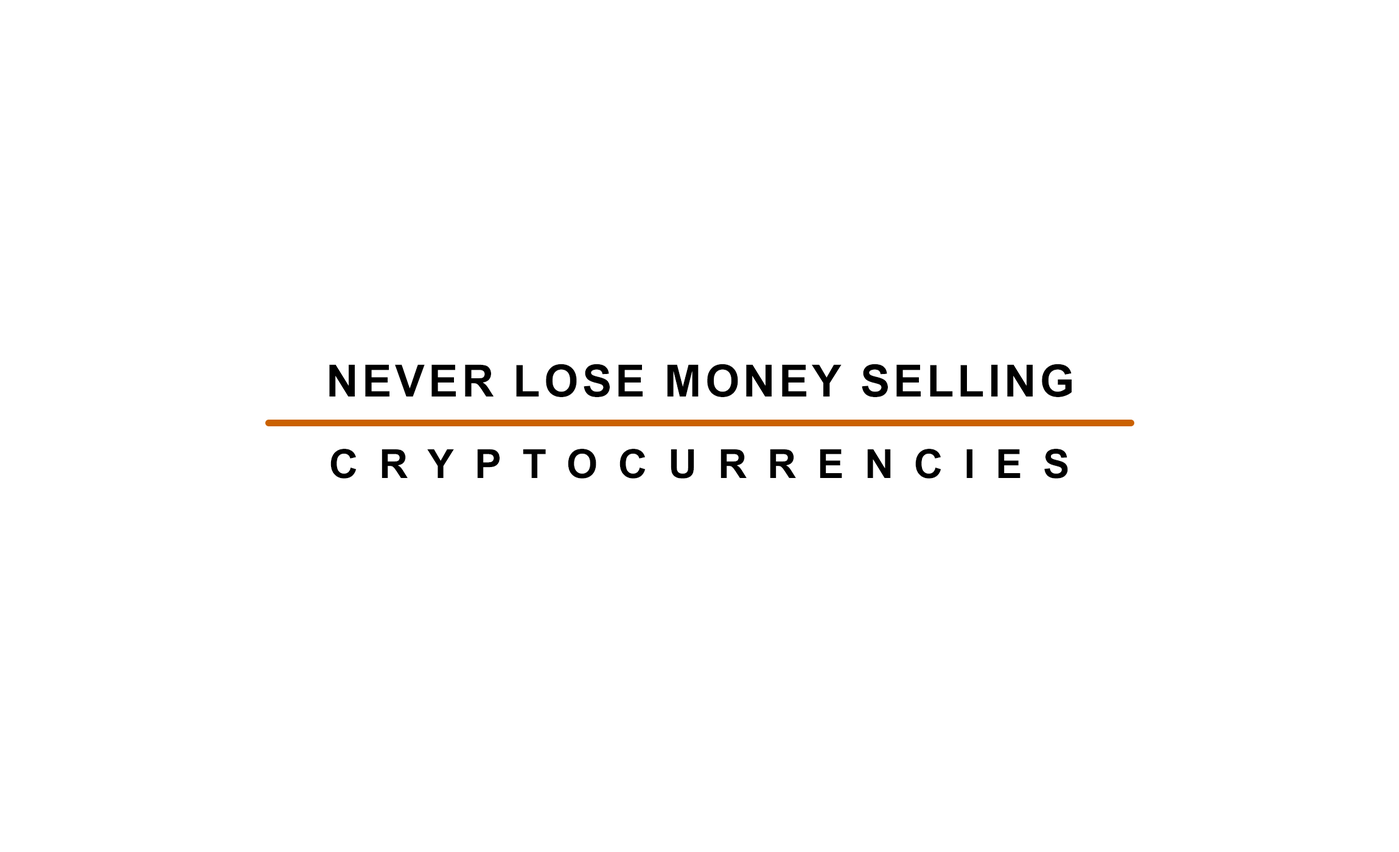
<style>
.page{position:relative;width:1399px;height:852px;background:#ffffff}
.page>*{position:absolute;margin:0}
.t1{font:44.5px "Arial-BoldMT";letter-spacing:0.08em;color:#000000}
.t2{font:40px "Arial-BoldMT";letter-spacing:0.52em;color:#000000}
.t3{font:40px "Arial-BoldMT";letter-spacing:0.62em;color:#000000}
</style>
<div class="page">
<p class="t1" style="left:329px;top:364px;width:742px;height:33px">NEVER LOSE MONEY SELLING</p>
<p class="t2" style="left:330px;top:449px;width:738px;height:30px">CRYPTOCURRENCIE<span class="t3">S</span></p>
</div>
